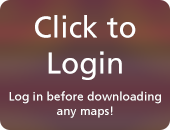
<style>
.page{position:relative;width:170px;height:130px}
.page>*{position:absolute;margin:0}
.t1{font:30px "FrutigerLinotype-Roman";color:#ffffff}
.t2{font:12px "FrutigerLinotype-Roman";color:#ffffff}
</style>
<div class="page">
<p class="t1" style="left:35px;top:15px;width:101px;height:65px;text-align:center">Click to Login</p>
<p class="t2" style="left:9px;top:91px;width:152px;height:27px;text-align:center">Log in before downloading any maps!</p>
</div>
